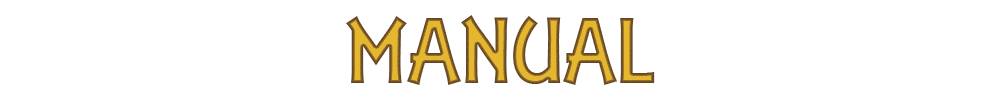
<style>
.page{position:relative;width:1000px;height:100px;background:#ffffff}
.page>*{position:absolute;margin:0}
.t1{font:100px "ARESSENCE"}
</style>
<div class="page">
<p class="t1" style="left:346px;top:15px;width:309px;height:70px">MANUAL</p>
</div>
